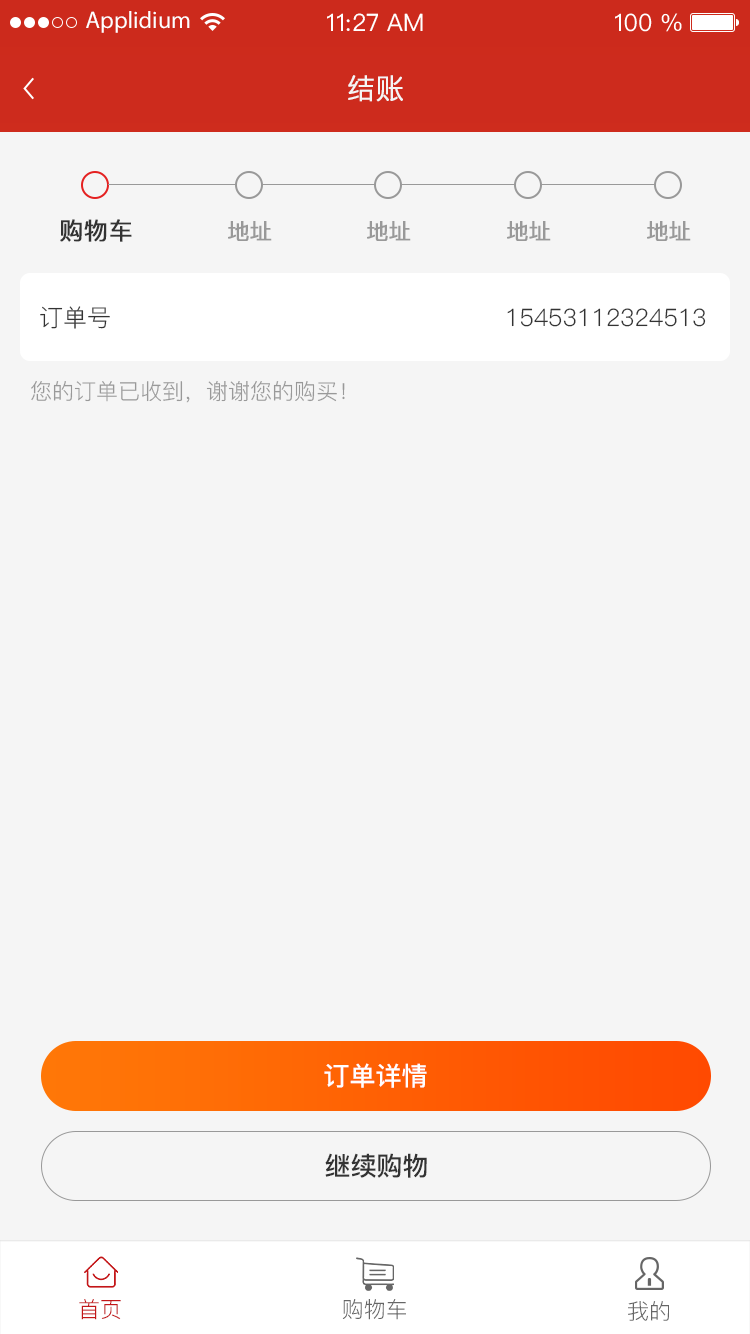
<style>
.page{position:relative;width:750px;height:1334px;background:#f5f5f5}
.page>*{position:absolute;margin:0}
.t1{font:24px "MyriadPro-Regular";color:#ffffff}
.t2{font:24px "PingFangSC-Regular";color:#ffffff}
.t3{font:28px "PingFang-SC-Regular";color:#f5f5f5;text-transform:uppercase;font-weight:bold}
.t4{font:24px "PingFang-SC-Medium";color:#333333;text-transform:uppercase;font-weight:bold}
.t5{font:22px "PingFang-SC-Medium";color:#999999;text-transform:uppercase;font-weight:bold}
.t6{font:24px "PingFang-SC-Regular";color:#333333;text-transform:uppercase}
.t7{font:22px "PingFang-SC-Regular";color:#999999;text-transform:uppercase}
.t8{font:26px "PingFang-SC-Bold";color:#ffffff;text-transform:uppercase}
.t9{font:26px "PingFang-SC-Bold";color:#333333;text-transform:uppercase}
.t10{font:22px "PingFang-SC-Regular";color:#c31618}
.t11{font:22px "PingFang-SC-Regular";color:#666666}
</style>
<div class="page">
<p class="t1" style="left:86px;top:11px;width:104px;height:22px">Applidium</p>
<p class="t2" style="left:327px;top:13px;width:96px;height:18px">11:27 AM</p>
<p class="t2" style="left:615px;top:13px;width:67px;height:19px">100 %</p>
<p class="t3" style="left:348px;top:75px;width:55px;height:27px">结账</p>
<p class="t4" style="left:60px;top:219px;width:72px;height:23px">购物车</p>
<p class="t5" style="left:228px;top:221px;width:44px;height:20px">地址</p>
<p class="t5" style="left:367px;top:221px;width:44px;height:20px">地址</p>
<p class="t5" style="left:507px;top:221px;width:44px;height:20px">地址</p>
<p class="t5" style="left:647px;top:221px;width:44px;height:20px">地址</p>
<p class="t6" style="left:40px;top:306px;width:70px;height:23px">订单号</p>
<p class="t6" style="left:507px;top:308px;width:199px;height:19px">15453112324513</p>
<p class="t7" style="left:31px;top:381px;width:314px;height:22px">您的订单已收到，谢谢您的购买！</p>
<p class="t8" style="left:324px;top:1063px;width:103px;height:25px">订单详情</p>
<p class="t9" style="left:325px;top:1153px;width:102px;height:25px">继续购物</p>
<p class="t10" style="left:79px;top:1299px;width:42px;height:21px">首页</p>
<p class="t11" style="left:342px;top:1299px;width:64px;height:21px">购物车</p>
<p class="t11" style="left:628px;top:1301px;width:41px;height:20px">我的</p>
</div>
